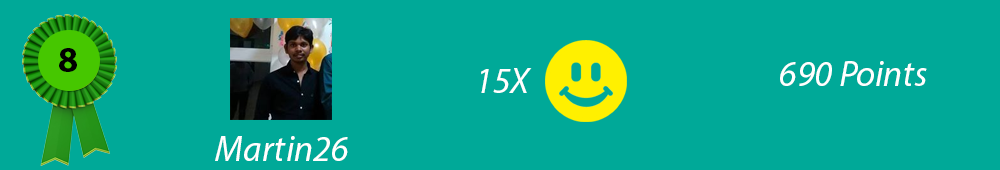
<style>
.page{position:relative;width:1000px;height:170px;background:#00a998}
.page>*{position:absolute;margin:0}
.t1{font:36px "MyriadPro-Bold";color:#000000}
.t2{font:36px "MyriadPro-It";color:#ffffff}
</style>
<div class="page">
<p class="t1" style="left:59px;top:48px;width:18px;height:24px">8</p>
<p class="t2" style="left:780px;top:61px;width:147px;height:25px">690 Points</p>
<p class="t2" style="left:481px;top:68px;width:51px;height:25px">15X</p>
<p class="t2" style="left:215px;top:136px;width:133px;height:25px">Martin26</p>
</div>
